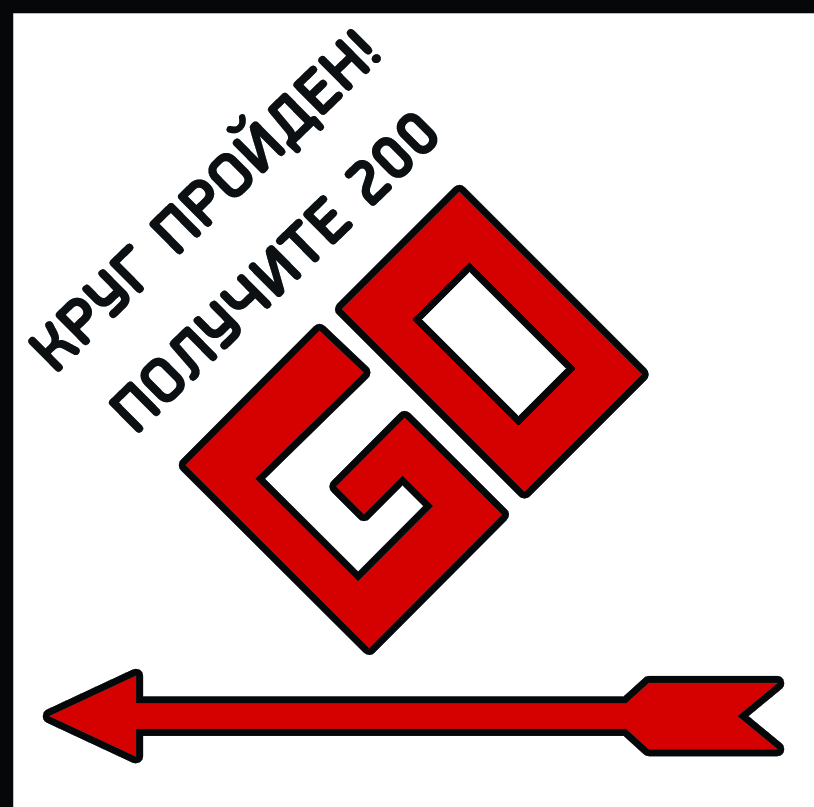
<style>
.page{position:relative;width:814px;height:807px;background:#ffffff}
.page>*{position:absolute;margin:0}
.t1{font:66.1px/100px "PFIsotextPro-Bold";color:#0d1012;text-transform:uppercase}
</style>
<div class="page">
<p class="t1" style="left:28px;top:29px;width:410px;height:404px;text-align:center;rotate:-44deg">круг пройден!<br>получите 200</p>
</div>
